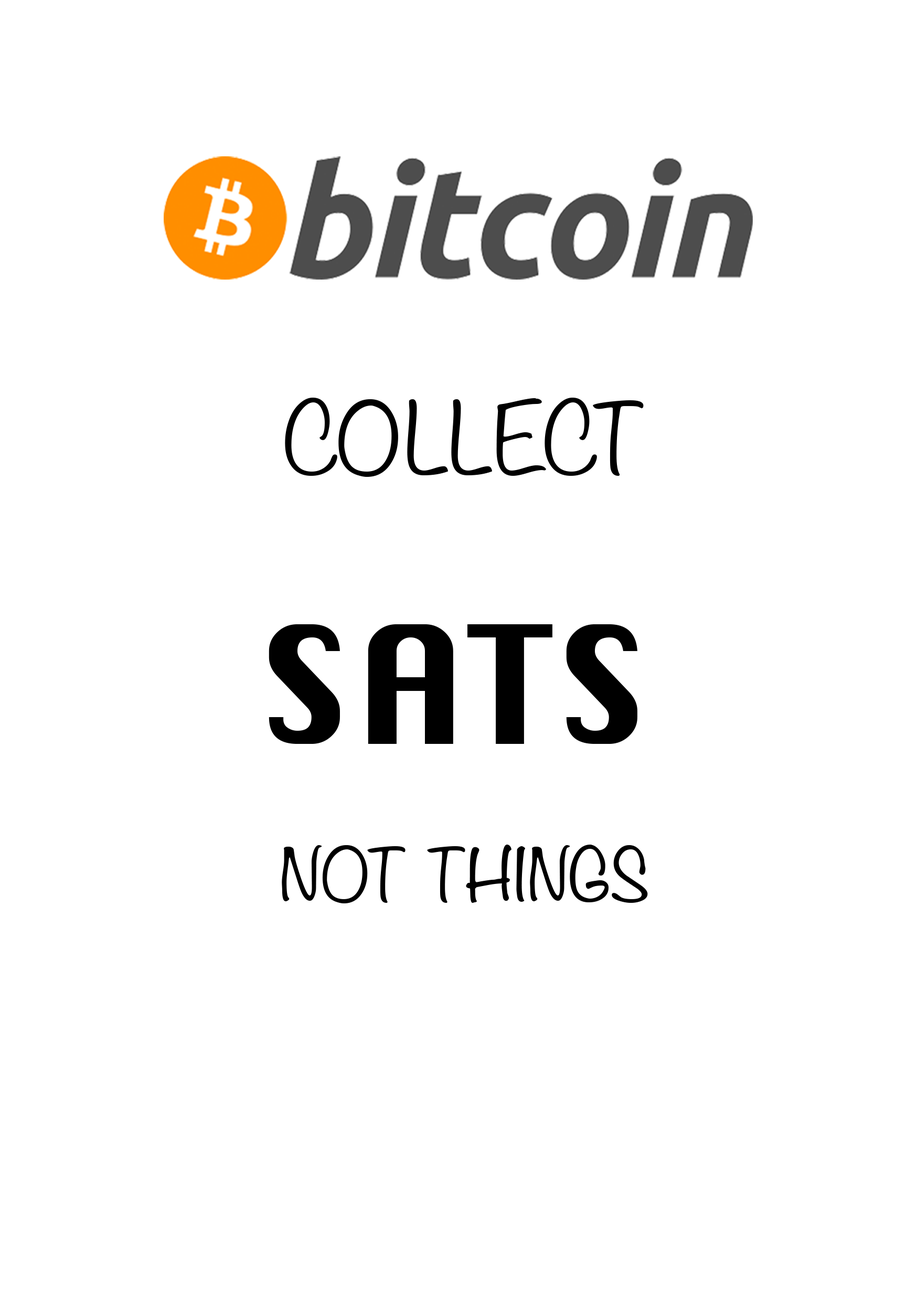
<style>
.page{position:relative;width:917px;height:1301px;background:#ffffff}
.page>*{position:absolute;margin:0}
.t1{font:65.6px "Noteworthy-Light";color:#000000;scale:1.06 1}
.t2{font:87.4px "Noteworthy-Light";color:#000000;scale:1.06 1}
.t3{font:159.5px "Silom";color:#000000;scale:1.06 1}
</style>
<div class="page">
<p class="t1" style="left:269px;top:398px;width:379px;height:505px;text-align:center"><span class="t2">COLLECT<br><br></span><span class="t3">SATS <br></span><br>NOT THINGS</p>
</div>
